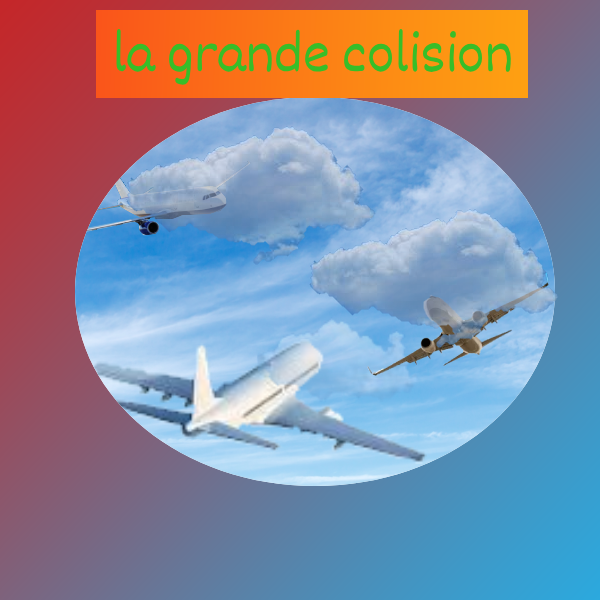
<style>
.page{position:relative;width:600px;height:600px}
.page>*{position:absolute;margin:0}
.t1{font:58px "Dekko";color:#37be29}
</style>
<div class="page">
<p class="t1" style="left:116px;top:28px;width:395px;height:57px">la grande colision</p>
</div>
